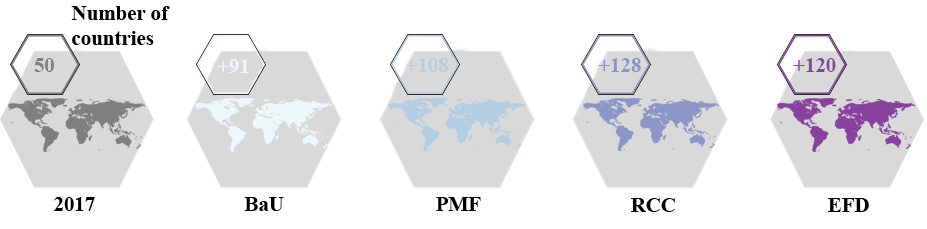
<style>
.page{position:relative;width:927px;height:229px;background:#ffffff}
.page>*{position:absolute;margin:0}
.t1{font:20.8px "TimesNewRomanPS-BoldMT";color:#000000}
.t2{font:20.8px "TimesNewRomanPS-BoldMT";color:#7f7f7f}
.t3{font:20.8px "TimesNewRomanPS-BoldMT";color:#edf8fb}
.t4{font:20.8px "TimesNewRomanPS-BoldMT";color:#b3cde3}
.t5{font:20.8px "TimesNewRomanPS-BoldMT";color:#8c96c6}
.t6{font:20.8px "TimesNewRomanPS-BoldMT";color:#88419d}
</style>
<div class="page">
<p class="t1" style="left:71px;top:6px;width:99px;height:39px">Number of<br>countries</p>
<p class="t2" style="left:34px;top:58px;width:20px;height:14px">50</p>
<p class="t3" style="left:217px;top:59px;width:32px;height:14px">+91</p>
<p class="t4" style="left:405px;top:58px;width:43px;height:14px">+108</p>
<p class="t5" style="left:598px;top:58px;width:43px;height:14px">+128</p>
<p class="t6" style="left:793px;top:58px;width:43px;height:14px">+120</p>
<p class="t1" style="left:54px;top:197px;width:41px;height:14px">2017</p>
<p class="t1" style="left:244px;top:197px;width:40px;height:14px">BaU</p>
<p class="t1" style="left:436px;top:197px;width:45px;height:14px">PMF</p>
<p class="t1" style="left:631px;top:198px;width:44px;height:14px">RCC</p>
<p class="t1" style="left:828px;top:198px;width:41px;height:14px">EFD</p>
</div>
